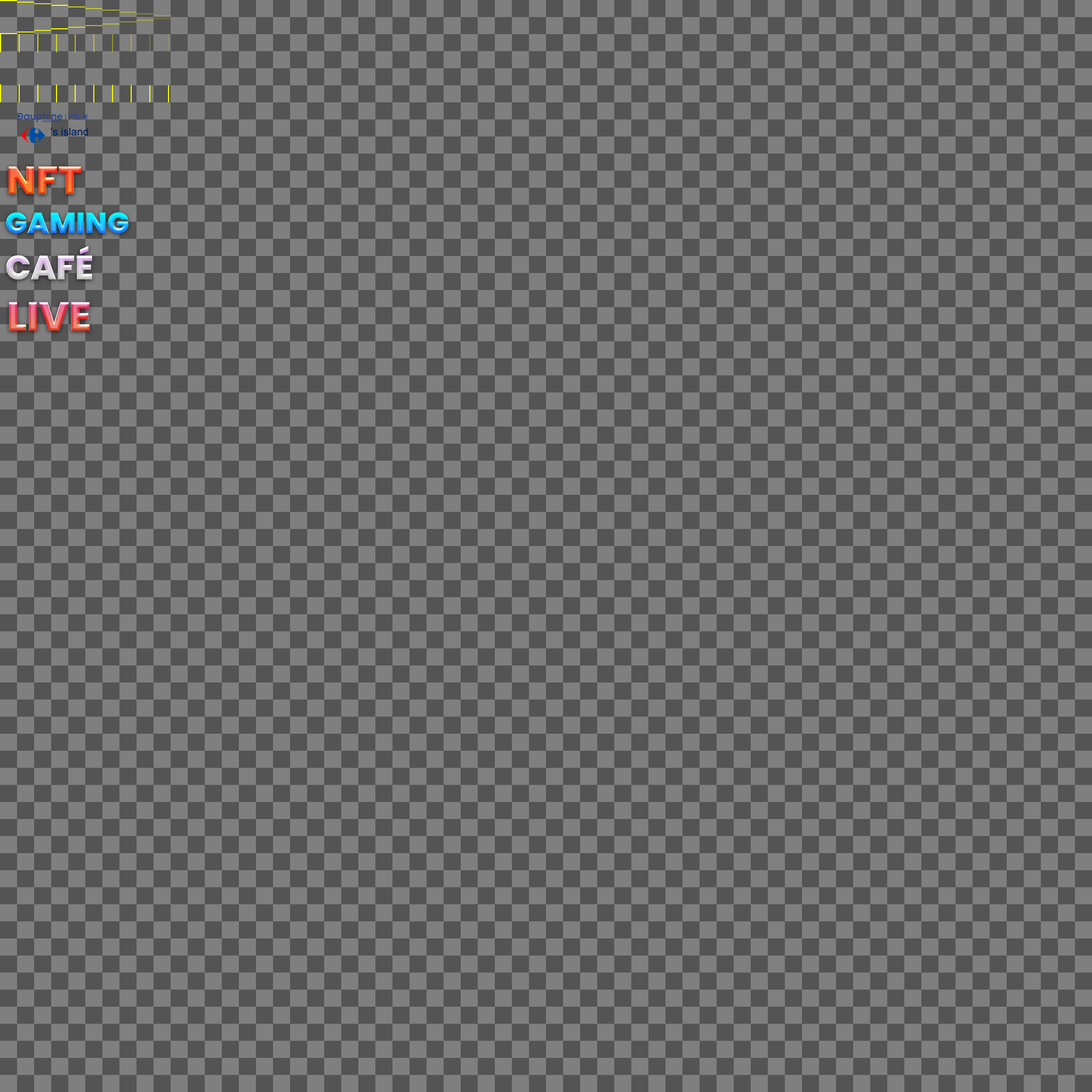
<style>
.page{position:relative;width:1092px;height:1092px;background:#7f7f7f}
.page>*{position:absolute;margin:0}
.t1{font:38.9px "Poppins-ExtraBold";text-transform:uppercase}
.t2{font:28.9px "Poppins-ExtraBold";text-transform:uppercase}
.t3{font:33.6px "Poppins-ExtraBold";text-transform:uppercase}
.t4{font:40.2px "Poppins-ExtraBold";text-transform:uppercase}
</style>
<div class="page">
<p class="t1" style="left:9px;top:166px;width:72px;height:28px">NFT</p>
<p class="t2" style="left:6px;top:212px;width:123px;height:22px">GAMING</p>
<p class="t3" style="left:6px;top:246px;width:86px;height:33px">CAFÉ</p>
<p class="t4" style="left:9px;top:302px;width:81px;height:29px">LIVE</p>
</div>
